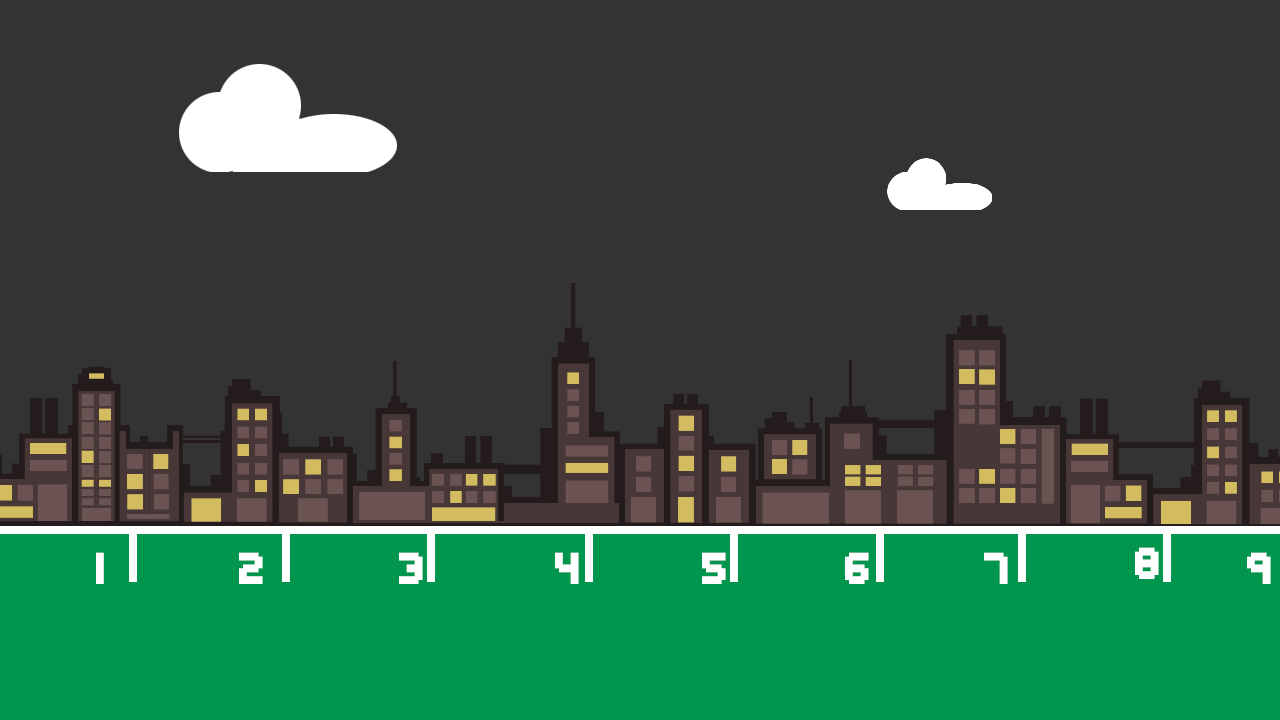
<style>
.page{position:relative;width:1280px;height:720px;background:#333333}
.page>*{position:absolute;margin:0}
.t1{font:50px "Edit Undo -BRK-";color:#ffffff}
</style>
<div class="page">
<p class="t1" style="left:96px;top:552px;width:8px;height:32px">1</p>
<p class="t1" style="left:239px;top:552px;width:24px;height:32px">2</p>
<p class="t1" style="left:399px;top:552px;width:24px;height:32px">3</p>
<p class="t1" style="left:555px;top:552px;width:24px;height:32px">4</p>
<p class="t1" style="left:702px;top:552px;width:24px;height:32px">5</p>
<p class="t1" style="left:845px;top:552px;width:24px;height:32px">6</p>
<p class="t1" style="left:984px;top:552px;width:24px;height:32px">7</p>
<p class="t1" style="left:1135px;top:547px;width:24px;height:32px">8</p>
<p class="t1" style="left:1247px;top:552px;width:24px;height:32px">9</p>
</div>
